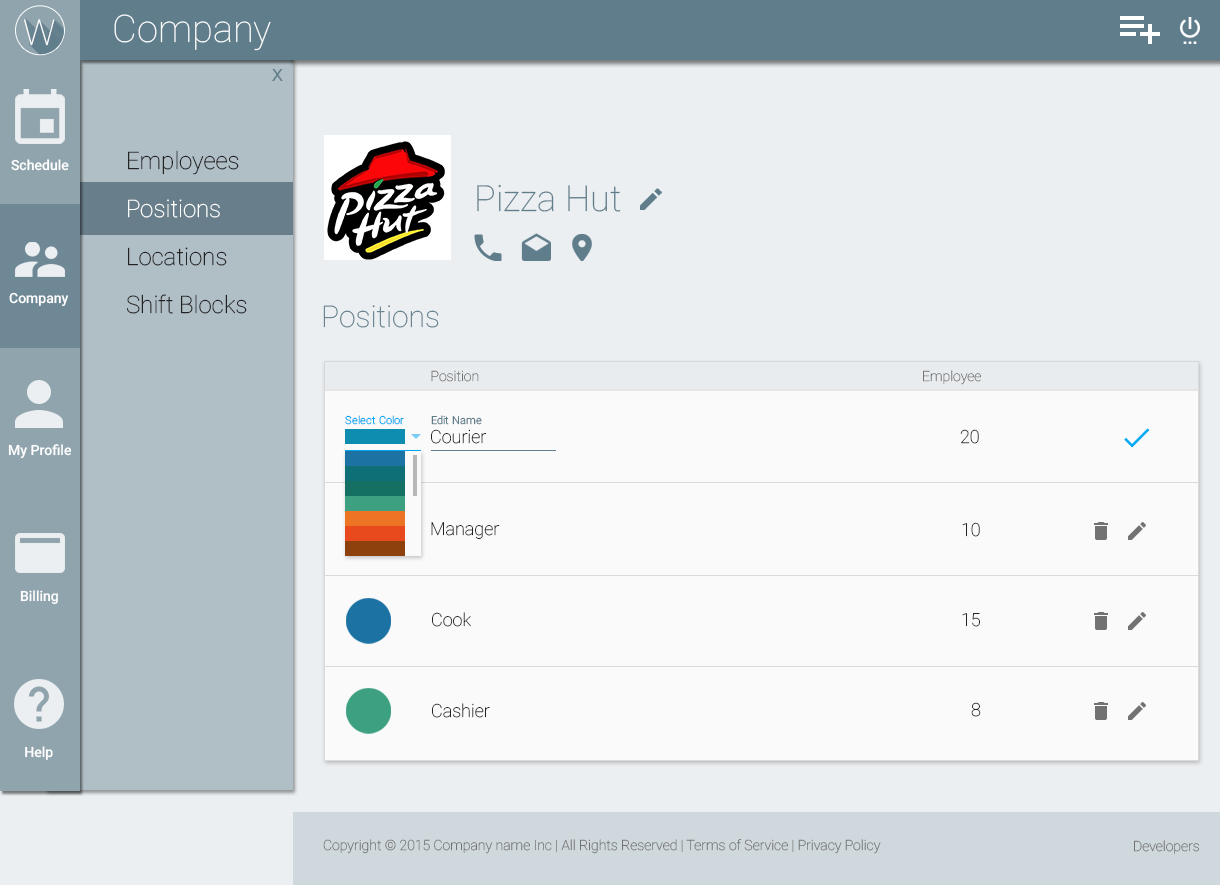
<style>
.page{position:relative;width:1220px;height:885px;background:#eceff1}
.page>*{position:absolute;margin:0}
.t1{font:38px "Roboto-Thin";color:#ffffff}
.t2{font:35.7px "Roboto-Thin";color:#ffffff}
.t3{font:18px "Raavi";color:#607d8b}
.t4{font:24px/48px "Roboto-Thin";color:#222222}
.t5{font:24px/48px "Roboto-Thin";color:#ffffff}
.t6{font:14px "Roboto-Medium";color:#ffffff}
.t7{font:36px "Roboto-Thin";color:#607d8b}
.t8{font:30px "Roboto-Thin";color:#607d8b}
.t9{font:14px "Roboto-Thin";color:#727272}
.t10{font:11px "Roboto-Light";color:#03a9f4}
.t11{font:11px "Roboto-Light";color:#607d8b}
.t12{font:18px "Roboto-Thin";color:#222222}
.t13{font:18px "Roboto-Thin"}
</style>
<div class="page">
<p class="t1" style="left:114px;top:14px;width:157px;height:37px">Company</p>
<p class="t2" style="left:24px;top:19px;width:31px;height:27px">W</p>
<p class="t3" style="left:272px;top:69px;width:11px;height:12px">X</p>
<p class="t4" style="left:127px;top:150px;width:120px;height:164px">Employees<br><span class="t5">Positions<br></span>Locations<br>Shift Blocks</p>
<p class="t6" style="left:11px;top:159px;width:58px;height:12px">Schedule</p>
<p class="t7" style="left:477px;top:184px;width:144px;height:28px">Pizza Hut</p>
<p class="t6" style="left:9px;top:292px;width:60px;height:14px">Company</p>
<p class="t8" style="left:323px;top:305px;width:116px;height:23px">Positions</p>
<p class="t9" style="left:431px;top:370px;width:48px;height:12px">Position</p>
<p class="t9" style="left:923px;top:370px;width:58px;height:15px">Employee</p>
<p class="t10" style="left:345px;top:415px;width:59px;height:10px">Select Color</p>
<p class="t11" style="left:431px;top:415px;width:51px;height:10px">Edit Name</p>
<p class="t12" style="left:431px;top:429px;width:56px;height:15px">Courier</p>
<p class="t13" style="left:960px;top:429px;width:19px;height:15px">20</p>
<p class="t6" style="left:8px;top:444px;width:64px;height:15px">My Profile</p>
<p class="t12" style="left:431px;top:522px;width:69px;height:17px">Manager</p>
<p class="t12" style="left:962px;top:522px;width:18px;height:15px">10</p>
<p class="t6" style="left:20px;top:590px;width:38px;height:15px">Billing</p>
<p class="t12" style="left:432px;top:612px;width:39px;height:15px">Cook</p>
<p class="t12" style="left:962px;top:613px;width:18px;height:14px">15</p>
<p class="t12" style="left:971px;top:702px;width:10px;height:15px">8</p>
<p class="t12" style="left:432px;top:703px;width:58px;height:15px">Cashier</p>
<p class="t6" style="left:25px;top:746px;width:28px;height:14px">Help</p>
<p class="t9" style="left:323px;top:839px;width:558px;height:15px">Copyright © 2015 Company name Inc | All Rights Reserved | Terms of Service | Privacy Policy</p>
<p class="t9" style="left:1134px;top:840px;width:65px;height:14px">Developers</p>
</div>
